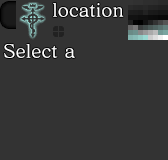
<style>
.page{position:relative;width:168px;height:160px;background:#333333}
.page>*{position:absolute;margin:0}
.t1{font:18px "MatissePro-M";letter-spacing:0.015em;color:#ffffff}
</style>
<div class="page">
<p class="t1" style="left:53px;top:3px;width:71px;height:14px">location</p>
<p class="t1" style="left:4px;top:44px;width:71px;height:14px">Select a</p>
</div>
